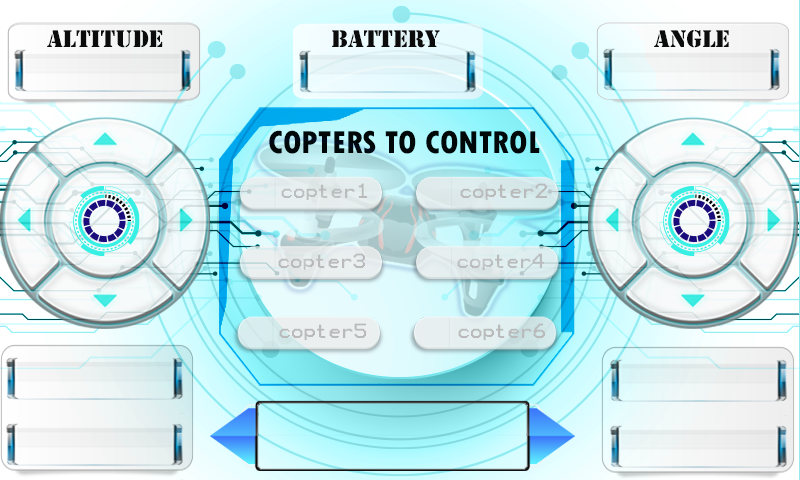
<style>
.page{position:relative;width:800px;height:480px}
.page>*{position:absolute;margin:0}
.t1{font:25px "Stencil";color:#0c0c0c}
.t2{font:33.3px "TwCenMT-CondensedExtraBold";color:#0c0c0c}
.t3{font:16.7px "Terminal";color:#babdbd}
.t4{font:16.7px "Terminal";color:#bababa}
.t5{font:16.7px "Terminal";color:#bababb}
.t6{font:16.7px "Terminal";color:#babdbe}
</style>
<div class="page">
<p class="t1" style="left:47px;top:30px;width:116px;height:18px">ALTITUDE</p>
<p class="t1" style="left:332px;top:30px;width:108px;height:18px">BATTERY</p>
<p class="t1" style="left:654px;top:30px;width:75px;height:18px">ANGLE</p>
<p class="t2" style="left:269px;top:130px;width:271px;height:24px">COPTERS TO CONTROL</p>
<p class="t3" style="left:281px;top:183px;width:86px;height:17px">copter1</p>
<p class="t4" style="left:460px;top:183px;width:87px;height:17px">copter2</p>
<p class="t5" style="left:278px;top:253px;width:87px;height:17px">copter3</p>
<p class="t6" style="left:457px;top:253px;width:87px;height:17px">copter4</p>
<p class="t4" style="left:279px;top:323px;width:87px;height:17px">copter5</p>
<p class="t4" style="left:458px;top:323px;width:87px;height:17px">copter6</p>
</div>
